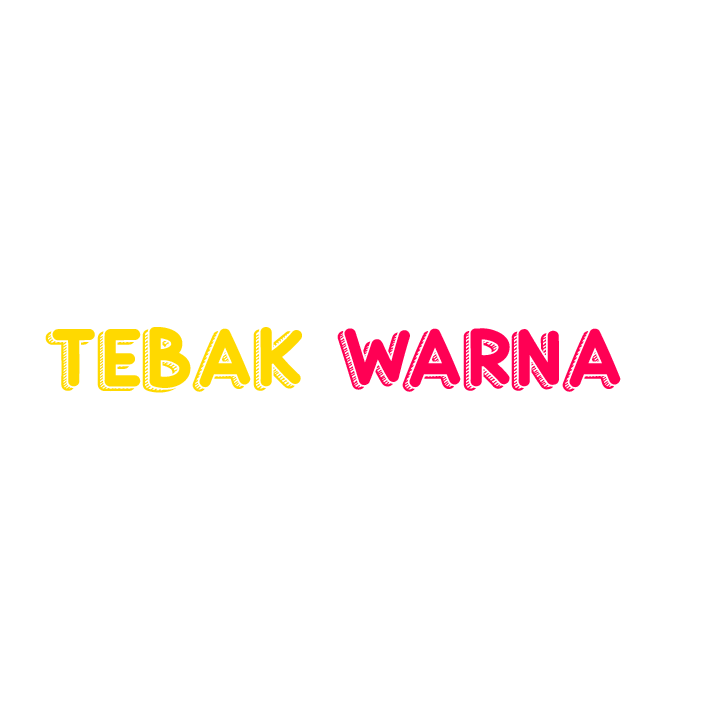
<style>
.page{position:relative;width:720px;height:720px;background:#ffffff}
.page>*{position:absolute;margin:0}
.t1{font:83.3px "ComedySketchDemoRegular";color:#ffd900}
.t2{font:83.3px "ComedySketchDemoRegular";color:#ff0054}
</style>
<div class="page">
<p class="t1" style="left:45px;top:327px;width:576px;height:66px">TEBAK <span class="t2">WARNA</span></p>
</div>
